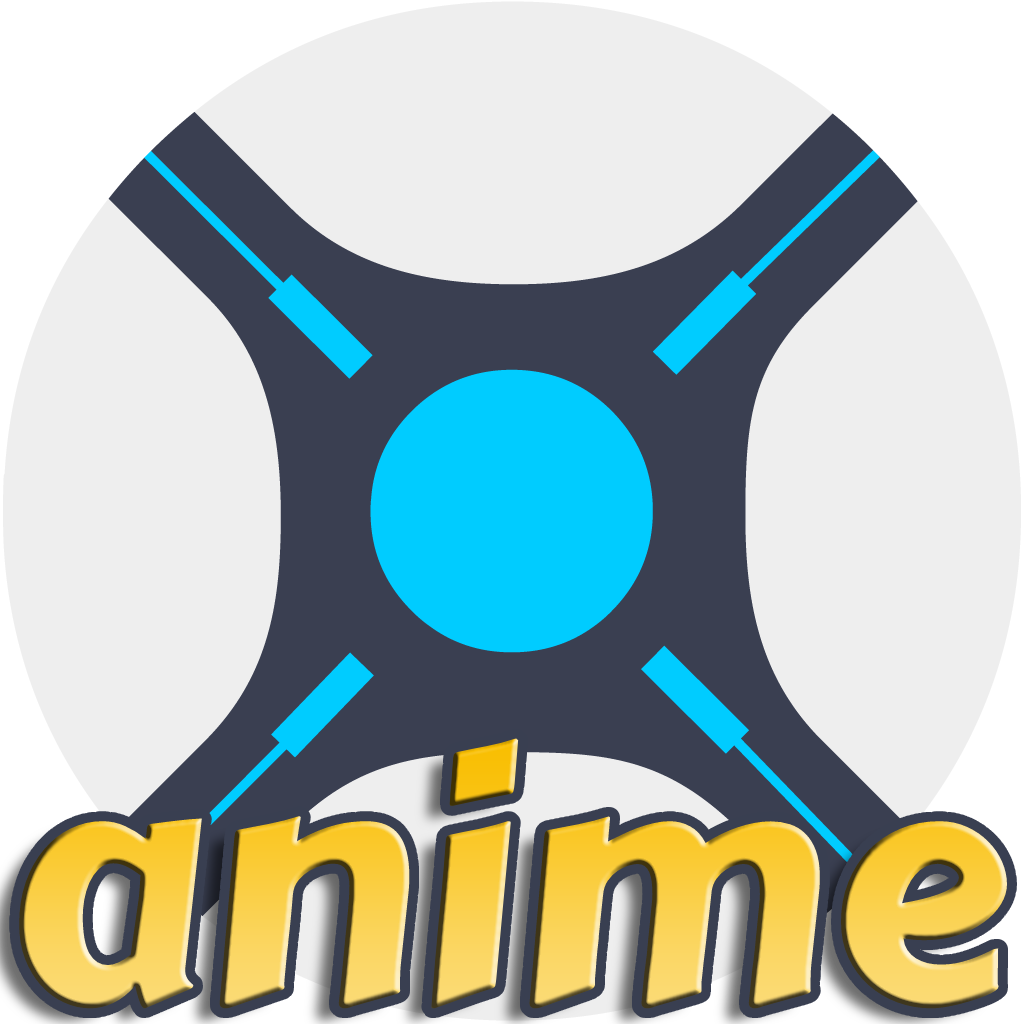
<style>
.page{position:relative;width:1024px;height:1024px;background:#eeeeee}
.page>*{position:absolute;margin:0}
.t1{font:328.2px "CarterOne"}
</style>
<div class="page">
<p class="t1" style="left:19px;top:738px;width:988px;height:271px">anime</p>
</div>
